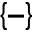
<style>
.page{position:relative;width:32px;height:32px;background:#ffffff}
.page>*{position:absolute;margin:0}
.t1{font:30px "HelveticaNeue-Light";color:#000000}
</style>
<div class="page">
<p class="t1" style="left:0px;top:2px;width:33px;height:28px">{  }</p>
</div>
